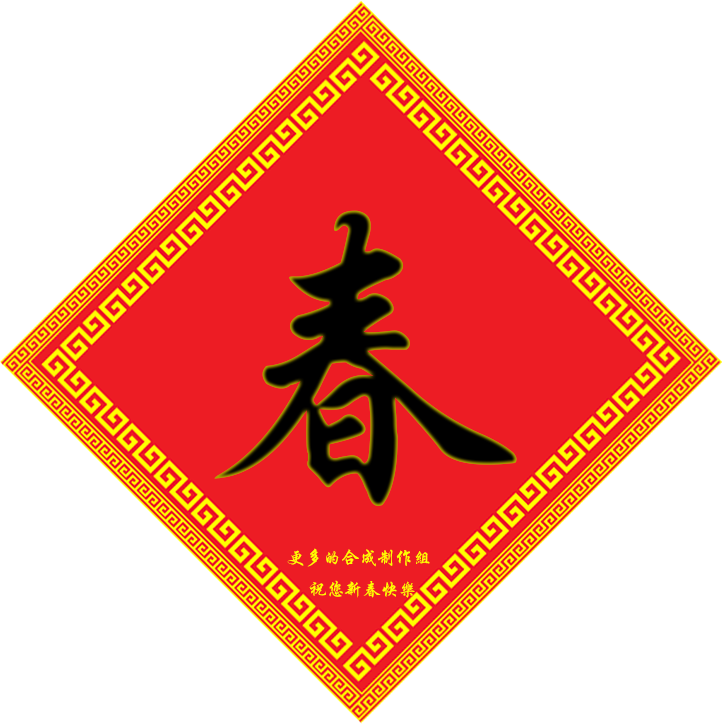
<style>
.page{position:relative;width:722px;height:724px;background:#ffffff}
.page>*{position:absolute;margin:0}
.t1{font:323.1px "FZXKFW--GB1-0";color:#000000}
.t2{font:18px "FZXKFW--GB1-0";color:#ffff00}
</style>
<div class="page">
<p class="t1" style="left:214px;top:210px;width:303px;height:296px">春</p>
<p class="t2" style="left:287px;top:548px;width:143px;height:50px">更多的合成制作组<br>    祝您新春快乐</p>
</div>
